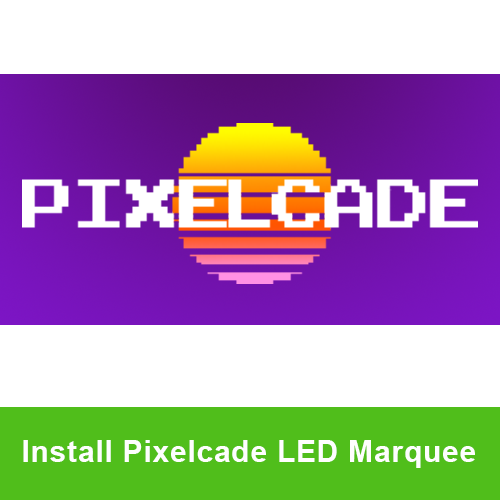
<style>
.page{position:relative;width:500px;height:500px;background:#ffffff}
.page>*{position:absolute;margin:0}
.t1{font:30px "Arial-BoldMT";letter-spacing:0.025em;color:#fefefe}
</style>
<div class="page">
<p class="t1" style="left:23px;top:440px;width:452px;height:28px">Install Pixelcade LED Marquee</p>
</div>
